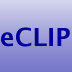
<style>
.page{position:relative;width:72px;height:72px}
.page>*{position:absolute;margin:0}
.t1{font:25px "LucidaSans-Demi";color:#00009c}
</style>
<div class="page">
<p class="t1" style="left:1px;top:27px;width:69px;height:20px">eCLIP</p>
</div>
